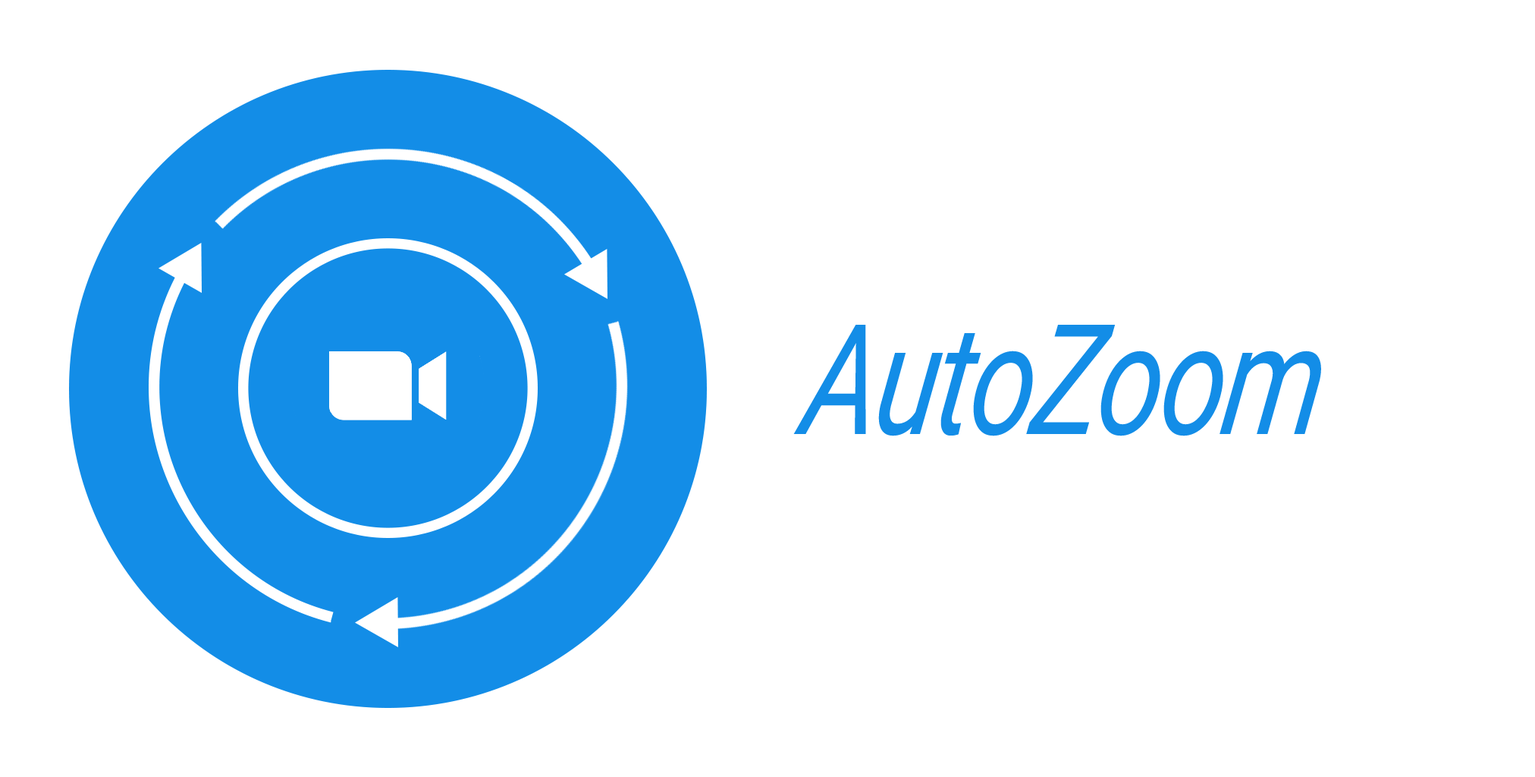
<style>
.page{position:relative;width:1535px;height:777px;background:#ffffff}
.page>*{position:absolute;margin:0}
.t1{font:155.4px "Roboto-Italic";letter-spacing:-0.025em;color:#138de7;scale:0.76 1}
</style>
<div class="page">
<p class="t1" style="left:793px;top:325px;width:528px;height:111px">AutoZoom</p>
</div>
